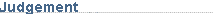
<style>
.page{position:relative;width:215px;height:14px;background:#ffffff}
.page>*{position:absolute;margin:0}
.t1{font:14px "Arial-BoldMT";color:#456689}
</style>
<div class="page">
<p class="t1" style="left:0px;top:2px;width:78px;height:13px">Judgement</p>
</div>
